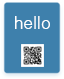
<style>
.page{position:relative;width:64px;height:79px;background:#3e80ac}
.page>*{position:absolute;margin:0}
.t1{font:20px "OriyaSangamMN";color:#ffffff}
</style>
<div class="page">
<p class="t1" style="left:15px;top:16px;width:35px;height:13px">hello</p>
</div>
